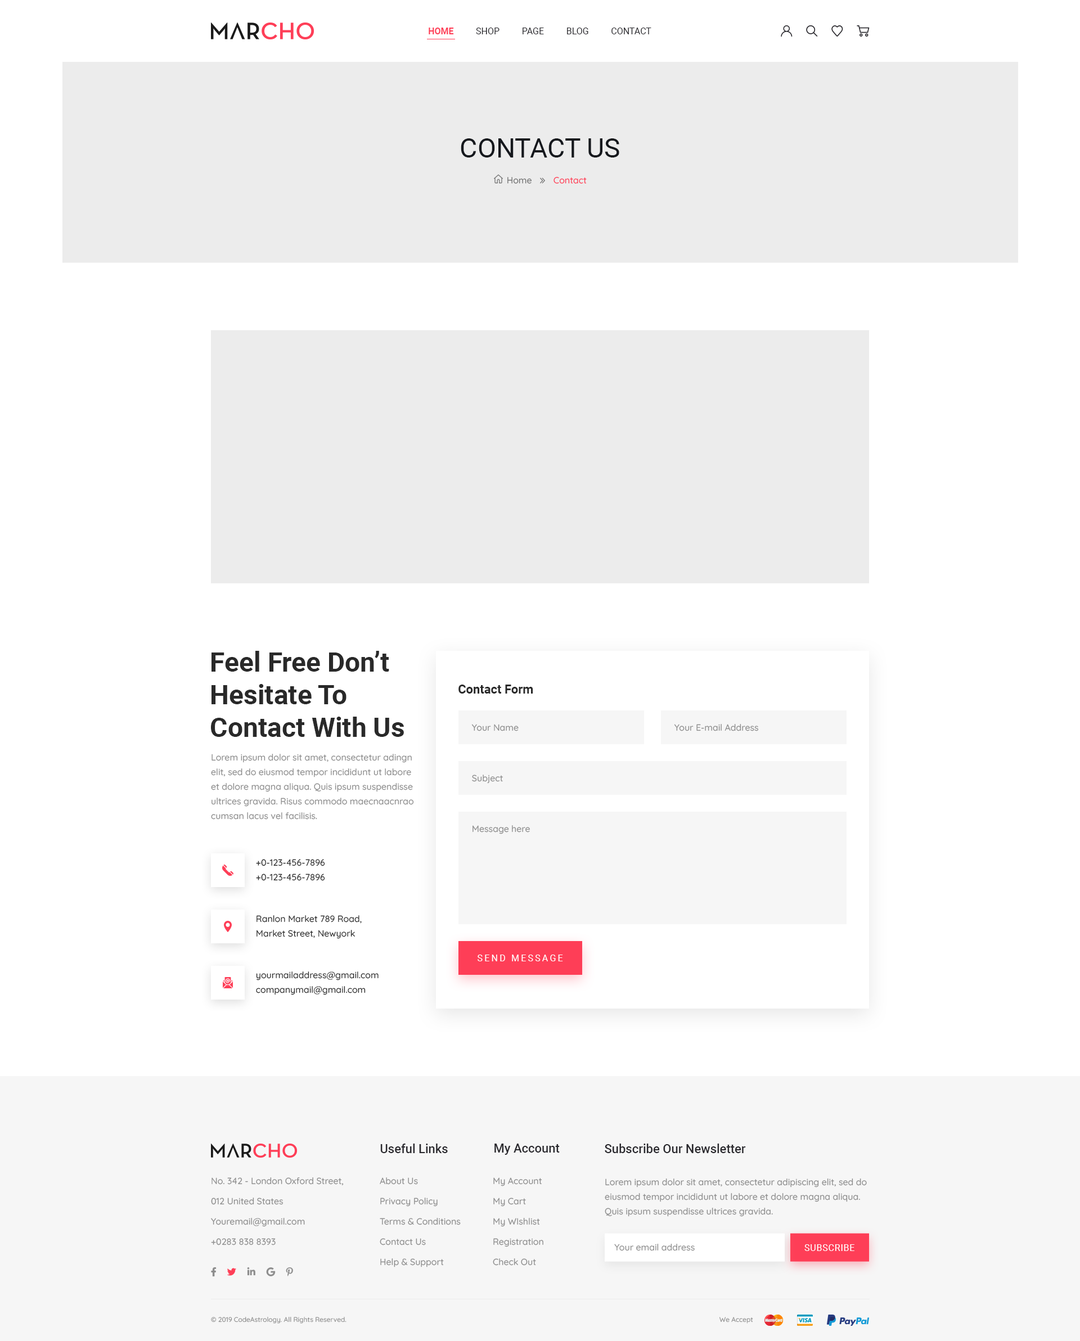
<style>
.page{position:relative;width:1080px;height:1341px;background:#ffffff}
.page>*{position:absolute;margin:0}
.t1{font:9px "Roboto-Regular";color:#29282d}
.t2{font:9px "Roboto-Bold";color:#fe3e57}
.t3{font:27px "Roboto-Regular";color:#15181d}
.t4{font:9px "Quicksand-Medium";color:#727272}
.t5{font:9px "Quicksand-Medium";color:#fe3e57}
.t6{font:27px/32.6px "Roboto-Bold";color:#292929}
.t7{font:12.4px "Roboto-Bold";color:#292929}
.t8{font:9px "Quicksand-Medium";color:#8d8d8d}
.t9{font:9px/14.6px "Quicksand-Medium";color:#8d8d8d}
.t10{font:9px/14.6px "Quicksand-Medium";color:#292929}
.t11{font:9px "Roboto-Regular";letter-spacing:0.2em;color:#ffffff}
.t12{font:12.4px "Roboto-Medium";color:#29282d}
.t13{font:9px/20.2px "Quicksand-Medium";color:#8d8d8d}
.t14{font:9px "Roboto-Regular";letter-spacing:0.05em;color:#ffffff;text-transform:uppercase}
.t15{font:6.8px "Quicksand-Medium";color:#8d8d8d}
</style>
<div class="page">
<p class="t1" style="left:429px;top:28px;width:222px;height:6px"><span class="t2">HOME          </span>SHOP          PAGE          BLOG          CONTACT</p>
<p class="t3" style="left:461px;top:138px;width:158px;height:20px">CONTACT US</p>
<p class="t4" style="left:507px;top:177px;width:25px;height:7px">Home</p>
<p class="t5" style="left:554px;top:177px;width:33px;height:7px">Contact</p>
<p class="t6" style="left:211px;top:651px;width:193px;height:86px">Feel Free Don’t<br>Hesitate To<br>Contact With Us</p>
<p class="t7" style="left:458px;top:685px;width:75px;height:9px">Contact Form</p>
<p class="t8" style="left:471px;top:724px;width:48px;height:7px">Your Name</p>
<p class="t8" style="left:674px;top:724px;width:85px;height:7px">Your E-mail Address</p>
<p class="t9" style="left:211px;top:754px;width:203px;height:66px">Lorem ipsum dolor sit amet, consectetur adingn elit, sed do eiusmod tempor incididunt ut labore et dolore magna aliqua. Quis ipsum suspendisse ultrices gravida. Risus commodo maecnaacnrao cumsan lacus vel facilisis.</p>
<p class="t8" style="left:472px;top:775px;width:31px;height:9px">Subject</p>
<p class="t8" style="left:472px;top:825px;width:58px;height:9px">Message here</p>
<p class="t10" style="left:256px;top:859px;width:69px;height:22px">+0-123-456-7896<br>+0-123-456-7896</p>
<p class="t10" style="left:256px;top:915px;width:106px;height:24px">Ranlon Market 789 Road,<br>Market Street, Newyork</p>
<p class="t11" style="left:478px;top:955px;width:85px;height:6px">SEND MESSAGE</p>
<p class="t10" style="left:256px;top:971px;width:123px;height:24px">yourmailaddress@gmail.com<br>companymail@gmail.com</p>
<p class="t12" style="left:380px;top:1144px;width:68px;height:9px">Useful Links</p>
<p class="t12" style="left:494px;top:1144px;width:66px;height:11px">My Account</p>
<p class="t12" style="left:605px;top:1144px;width:141px;height:9px">Subscribe Our Newsletter</p>
<p class="t13" style="left:211px;top:1177px;width:133px;height:68px">No. 342 - London Oxford Street,<br>012 United States<br>Youremail@gmail.com<br>+0283 838 8393</p>
<p class="t13" style="left:380px;top:1177px;width:81px;height:90px">About Us<br>Privacy Policy<br>Terms &amp; Conditions<br>Contact Us<br>Help &amp; Support</p>
<p class="t13" style="left:493px;top:1177px;width:50px;height:89px">My Account<br>My Cart<br>My WIshlist<br>Registration<br>Check Out</p>
<p class="t9" style="left:605px;top:1178px;width:262px;height:39px">Lorem ipsum dolor sit amet, consectetur adipiscing elit, sed do eiusmod tempor incididunt ut labore et dolore magna aliqua. Quis ipsum suspendisse ultrices gravida.</p>
<p class="t8" style="left:614px;top:1244px;width:81px;height:7px">Your email address</p>
<p class="t14" style="left:804px;top:1244px;width:50px;height:7px">Subscribe</p>
<p class="t15" style="left:211px;top:1317px;width:135px;height:7px">© 2019 CodeAstrology. All Rights Reserved.</p>
<p class="t15" style="left:719px;top:1317px;width:34px;height:7px">We Accept</p>
</div>
